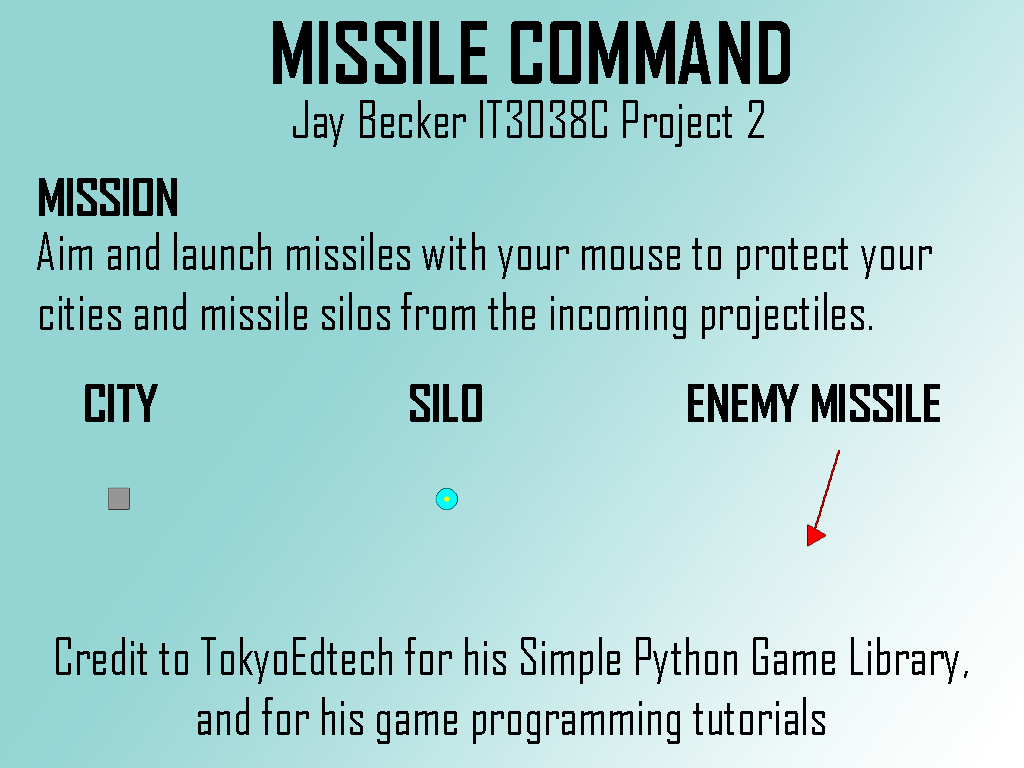
<style>
.page{position:relative;width:1024px;height:768px;background:#94d5d4}
.page>*{position:absolute;margin:0}
.t1{font:83.3px "AgencyFB-Bold";color:#000000}
.t2{font:50px "AgencyFB-Reg";color:#000000}
.t3{font:50px "AgencyFB-Bold";color:#000000}
</style>
<div class="page">
<p class="t1" style="left:273px;top:21px;width:517px;height:63px">MISSILE COMMAND</p>
<p class="t2" style="left:293px;top:100px;width:471px;height:47px">Jay Becker IT3038C Project 2</p>
<p class="t3" style="left:39px;top:178px;width:138px;height:38px">MISSION</p>
<p class="t2" style="left:37px;top:232px;width:895px;height:107px">Aim and launch missiles with your mouse to protect your cities and missile silos from the incoming projectiles.</p>
<p class="t3" style="left:85px;top:384px;width:73px;height:38px">CITY</p>
<p class="t3" style="left:410px;top:384px;width:72px;height:38px">SILO</p>
<p class="t3" style="left:688px;top:384px;width:252px;height:38px">ENEMY MISSILE</p>
<p class="t2" style="left:56px;top:637px;width:912px;height:107px;text-align:center">Credit to TokyoEdtech for his Simple Python Game Library,<br>and for his game programming tutorials</p>
</div>
